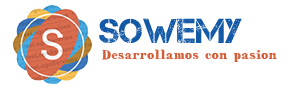
<style>
.page{position:relative;width:300px;height:92px;background:#ffffff}
.page>*{position:absolute;margin:0}
.t1{font:34.4px "Captureit";color:#1158a6}
.t2{font:11.3px "HVDBodedo-Medium";color:#d55c36}
</style>
<div class="page">
<p class="t1" style="left:99px;top:18px;width:143px;height:25px">Sowemy</p>
<p class="t2" style="left:101px;top:48px;width:176px;height:14px">Desarrollamos con pasion</p>
</div>
